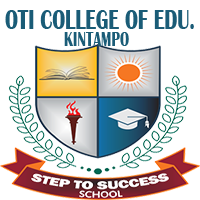
<style>
.page{position:relative;width:200px;height:200px;background:#ffffff}
.page>*{position:absolute;margin:0}
.t1{font:29.1px "BritannicBold";color:#1a5c77;scale:0.68 1}
.t2{font:20.8px "BritannicBold";color:#1a5c77;scale:0.68 1}
</style>
<div class="page">
<p class="t1" style="left:5px;top:10px;width:189px;height:19px">OTI COLLEGE OF EDU.</p>
<p class="t2" style="left:64px;top:32px;width:65px;height:14px">KINTAMPO</p>
</div>
